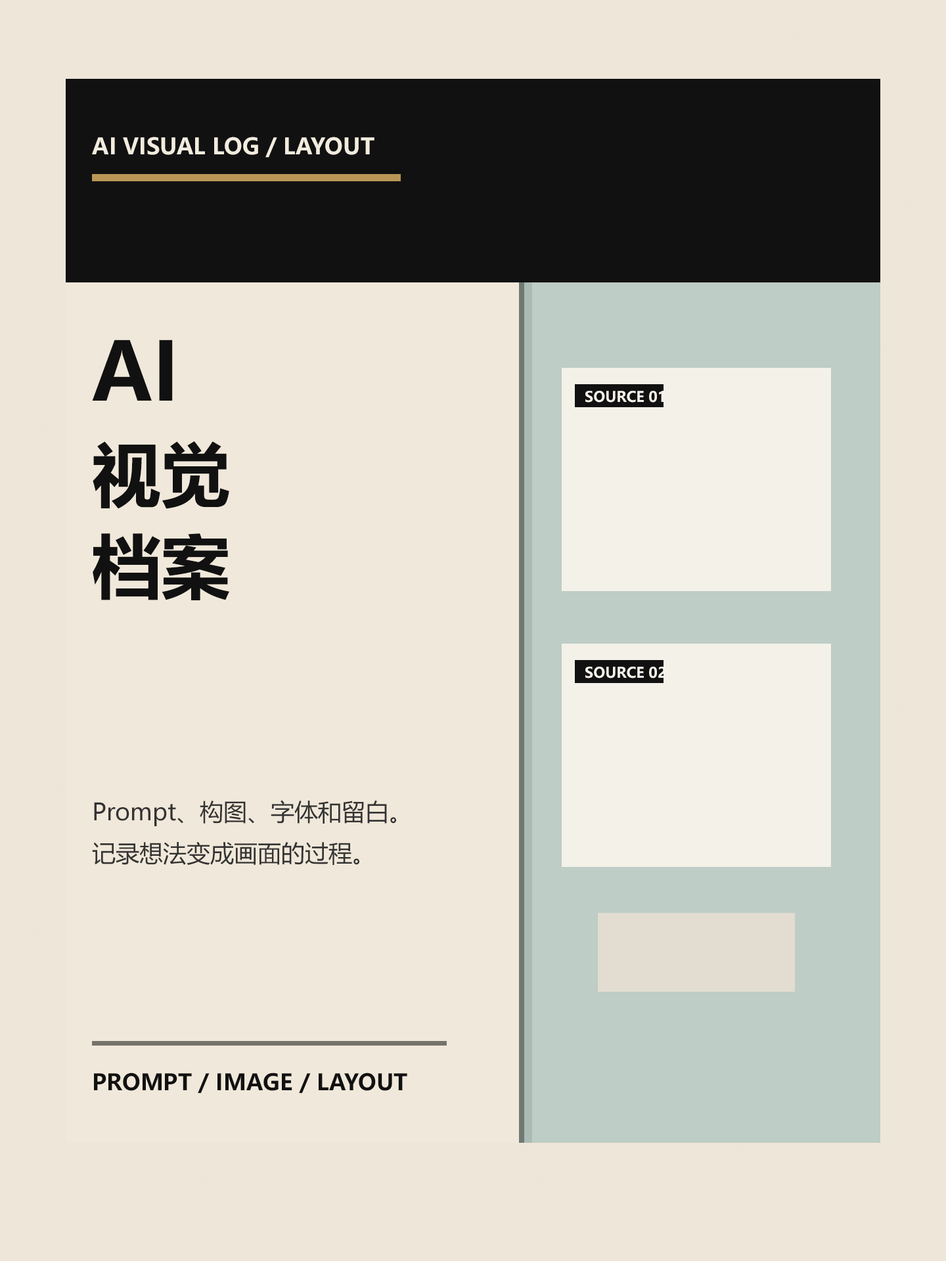
<style>
.page{position:relative;width:946px;height:1261px;background:#f0e8da}
.page>*{position:absolute;margin:0}
.t1{font:22.3px "MicrosoftYaHeiUI-Bold";color:#f2ecdf}
.t2{font:80.1px "MicrosoftYaHeiUI-Bold";color:#111111}
.t3{font:14.4px "MicrosoftYaHeiUI-Bold";color:#f8f3ea}
.t4{font:69px "MicrosoftYaHeiUI-Bold";color:#111111}
.t5{font:23.6px "MicrosoftYaHeiUI";color:#333333}
.t6{font:22.3px "MicrosoftYaHeiUI-Bold";color:#111111}
</style>
<div class="page">
<p class="t1" style="left:92px;top:137px;width:282px;height:21px">AI VISUAL LOG / LAYOUT</p>
<p class="t2" style="left:92px;top:340px;width:81px;height:61px">AI</p>
<p class="t3" style="left:585px;top:391px;width:79px;height:12px">SOURCE 01</p>
<p class="t4" style="left:93px;top:441px;width:136px;height:68px">视觉</p>
<p class="t4" style="left:93px;top:533px;width:136px;height:67px">档案</p>
<p class="t3" style="left:585px;top:667px;width:81px;height:11px">SOURCE 02</p>
<p class="t5" style="left:92px;top:800px;width:304px;height:65px">Prompt、构图、字体和留白。<br>记录想法变成画面的过程。</p>
<p class="t6" style="left:94px;top:1072px;width:313px;height:21px">PROMPT / IMAGE / LAYOUT</p>
</div>
